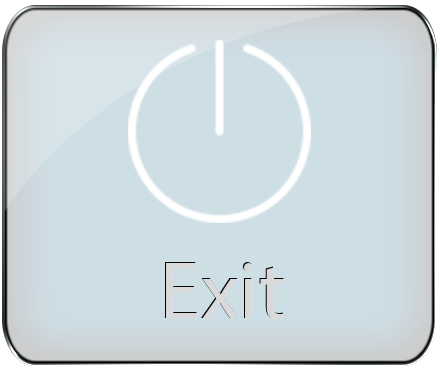
<style>
.page{position:relative;width:440px;height:369px;background:#cddee5}
.page>*{position:absolute;margin:0}
.t1{font:83.2px "MyriadPro-Regular";color:#d9d9d9}
</style>
<div class="page">
<p class="t1" style="left:165px;top:262px;width:119px;height:57px">Exit</p>
</div>
